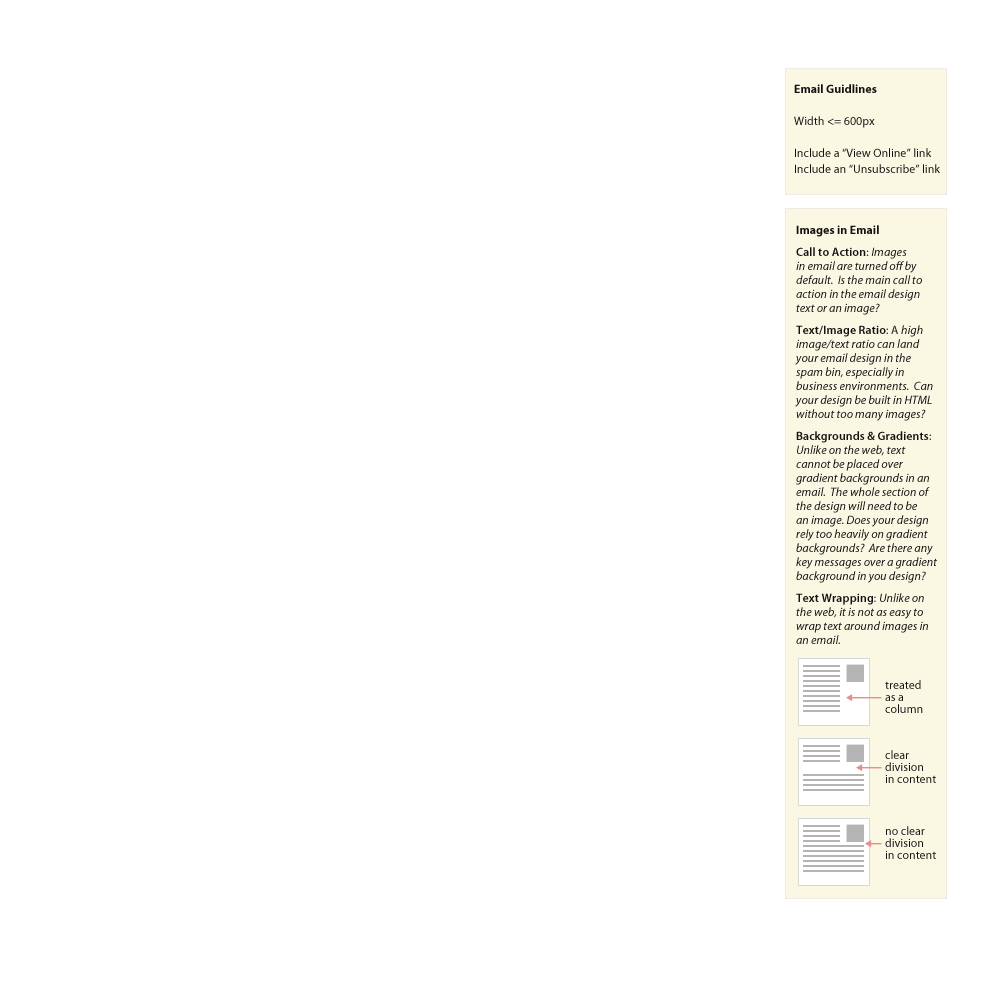
<style>
.page{position:relative;width:1000px;height:1000px;background:#ffffff}
.page>*{position:absolute;margin:0}
.t1{font:12px/8px "MyriadPro-Regular";color:#121212}
.t2{font:12px/8px "MyriadPro-Bold";color:#121212}
.t3{font:12px/14px "MyriadPro-It";color:#121212}
.t4{font:12px/14px "MyriadPro-Bold";color:#121212}
.t5{font:12px/14px "MyriadPro-Semibold";color:#121212}
.t6{font:12px/14px "MyriadPro-Regular";color:#121212}
.t7{font:12px/12px "MyriadPro-Regular";color:#121212}
</style>
<div class="page">
<p class="t1" style="left:794px;top:84px;width:146px;height:89px"><span class="t2">Email Guidlines<br></span><br>Width &lt;= 600px<br><br>Include a “View Online” link<br>Include an “Unsubscribe” link</p>
<p class="t3" style="left:795px;top:225px;width:143px;height:419px"><span class="t4">Images in Email<br></span><span class="t5">Call to Action</span><span class="t6">: </span>Images in email are turned off by default.  Is the main call to action in the email design text or an image?<br><span class="t5">Text/Image Ratio</span><span class="t6">: A </span>high image/text ratio can land your email design in the spam bin, especially in business environments.  Can your design be built in HTML without too many images?<br><span class="t5">Backgrounds &amp; Gradients</span><span class="t6">: </span>Unlike on the web, text cannot be placed over gradient backgrounds in an email.  The whole section of the design will need to be an image. Does your design rely too heavily on gradient backgrounds?  Are there any key messages over a gradient background in you design?<br><span class="t5">Text Wrapping</span><span class="t6">: </span>Unlike on the web, it is not as easy to wrap text around images in an email.</p>
<p class="t7" style="left:885px;top:680px;width:38px;height:33px">treated <br>as a<br>column</p>
<p class="t7" style="left:885px;top:750px;width:51px;height:33px">clear<br>division<br>in content</p>
<p class="t7" style="left:885px;top:826px;width:51px;height:33px">no clear<br>division<br>in content</p>
</div>
